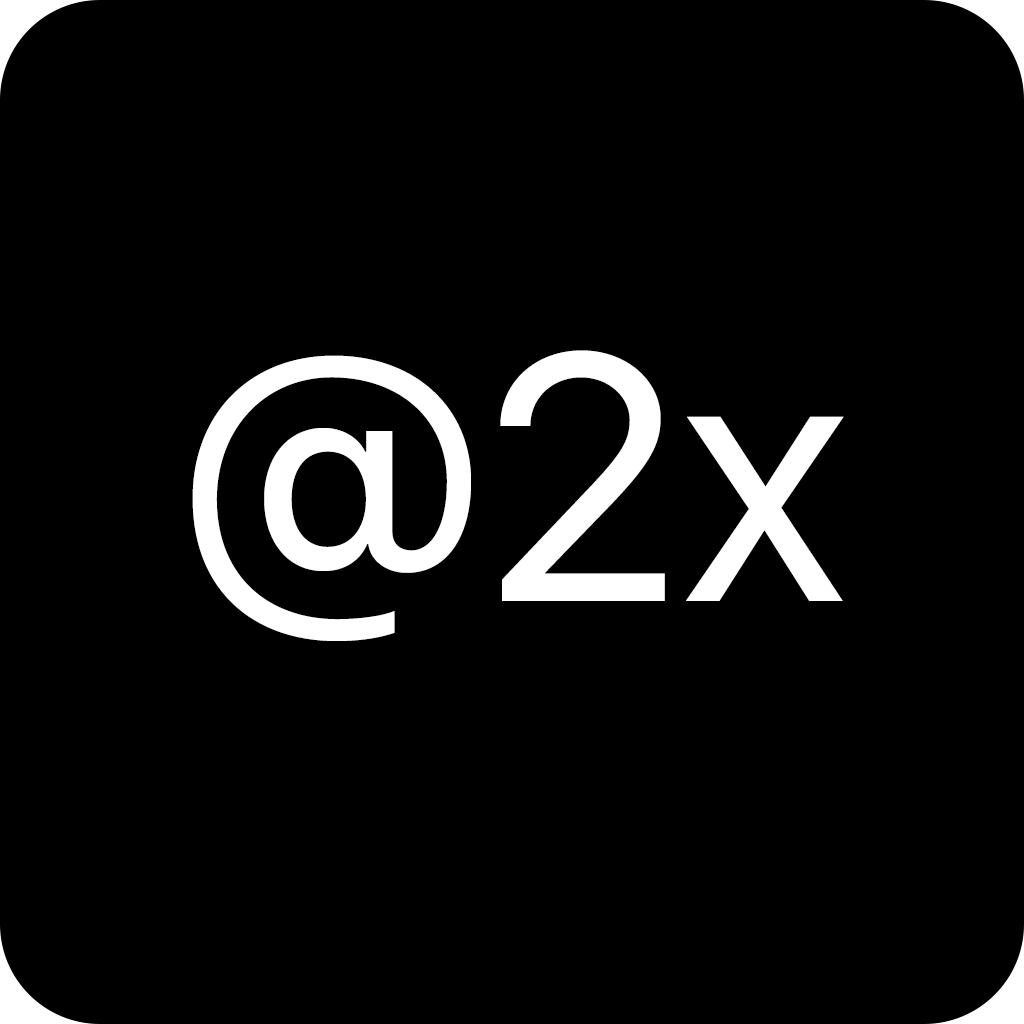
<style>
.page{position:relative;width:1024px;height:1024px;background:#000000}
.page>*{position:absolute;margin:0}
.t1{font:350px "SFUIDisplay-Regular";color:#ffffff}
</style>
<div class="page">
<p class="t1" style="left:192px;top:350px;width:652px;height:291px">@2x</p>
</div>
